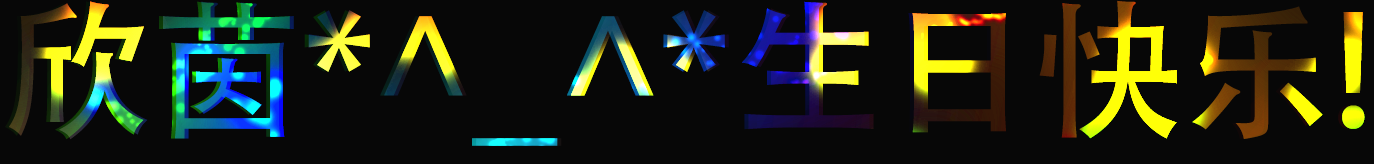
<style>
.page{position:relative;width:1374px;height:164px;background:#070707}
.page>*{position:absolute;margin:0}
.t1{font:150px "AdobeHeitiStd-Regular"}
</style>
<div class="page">
<p class="t1" style="left:5px;top:0px;width:1356px;height:146px">欣茵*^_^*生日快乐!</p>
<p class="t1" style="left:5px;top:0px;width:1356px;height:146px">欣茵*^_^*生日快乐!</p>
<p class="t1" style="left:9px;top:0px;width:1356px;height:146px">欣茵*^_^*生日快乐!</p>
<p class="t1" style="left:9px;top:0px;width:1356px;height:146px">欣茵*^_^*生日快乐!</p>
<p class="t1" style="left:9px;top:0px;width:1356px;height:146px">欣茵*^_^*生日快乐!</p>
<p class="t1" style="left:9px;top:0px;width:1356px;height:146px">欣茵*^_^*生日快乐!</p>
</div>
